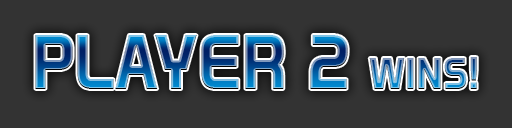
<style>
.page{position:relative;width:512px;height:128px;background:#333333}
.page>*{position:absolute;margin:0}
.t1{font:70px "Venacti-Bold"}
.t2{font:40px "Venacti-Bold";text-transform:uppercase}
</style>
<div class="page">
<p class="t1" style="left:35px;top:35px;width:442px;height:54px">PLAYER 2 <span class="t2">WINS!</span></p>
</div>
